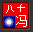
<style>
.page{position:relative;width:33px;height:32px;background:#f20000}
.page>*{position:absolute;margin:0}
.t1{font:10.4px "SimSun";color:#ffffff}
.t2{font:11.7px "SimSun";color:#ffffff}
</style>
<div class="page">
<p class="t1" style="left:6px;top:4px;width:19px;height:9px">八十</p>
<p class="t2" style="left:16px;top:15px;width:11px;height:12px">冯</p>
</div>
